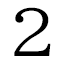
<style>
.page{position:relative;width:64px;height:64px;background:#ffffff}
.page>*{position:absolute;margin:0}
.t1{font:62px "BIZ-UDMincho-Medium";letter-spacing:-0.2em;color:#000000;scale:1.13 1}
</style>
<div class="page">
<p class="t1" style="left:14px;top:7px;width:37px;height:49px">２</p>
</div>
